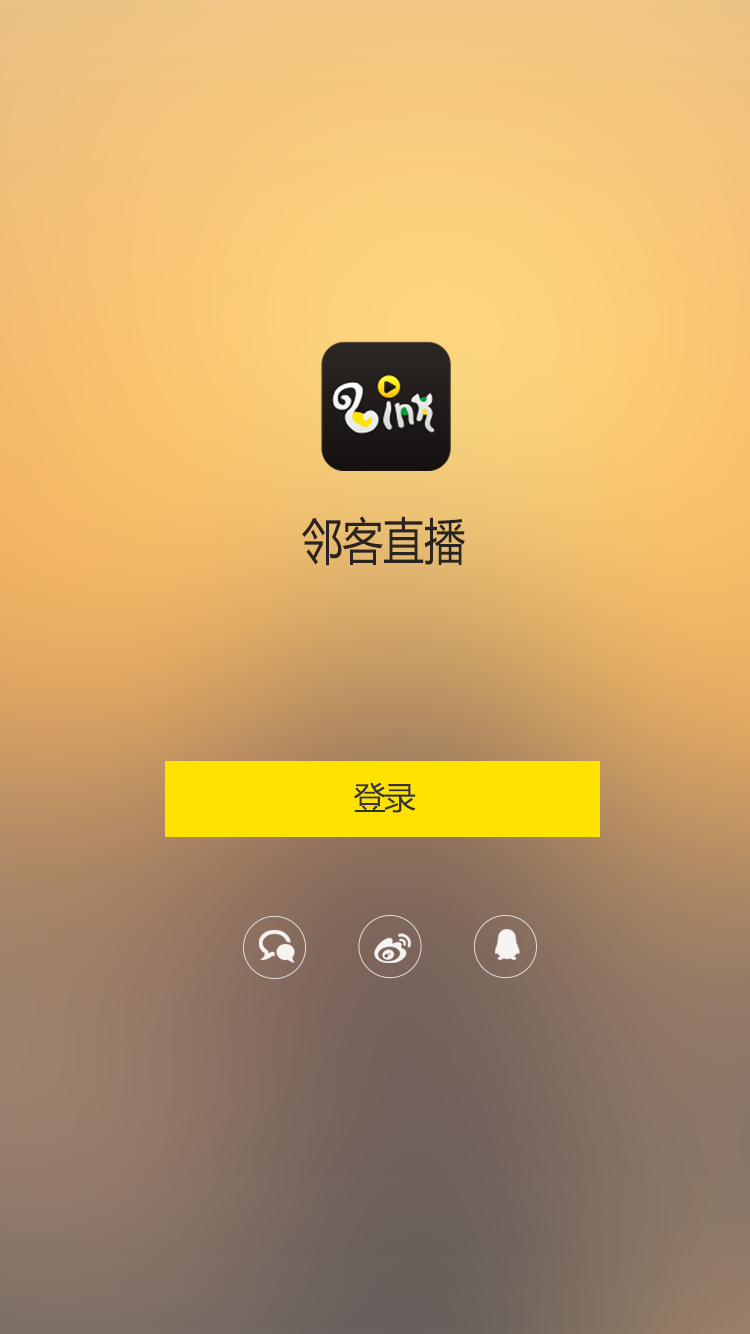
<style>
.page{position:relative;width:750px;height:1334px}
.page>*{position:absolute;margin:0}
.t1{font:50px "MicrosoftYaHei";color:#292321;scale:0.82 1}
.t2{font:32px "MicrosoftYaHei";letter-spacing:-0.06em;color:#333333}
</style>
<div class="page">
<p class="t1" style="left:302px;top:516px;width:163px;height:50px">邻客直播</p>
<p class="t2" style="left:354px;top:782px;width:62px;height:31px">登录</p>
</div>
